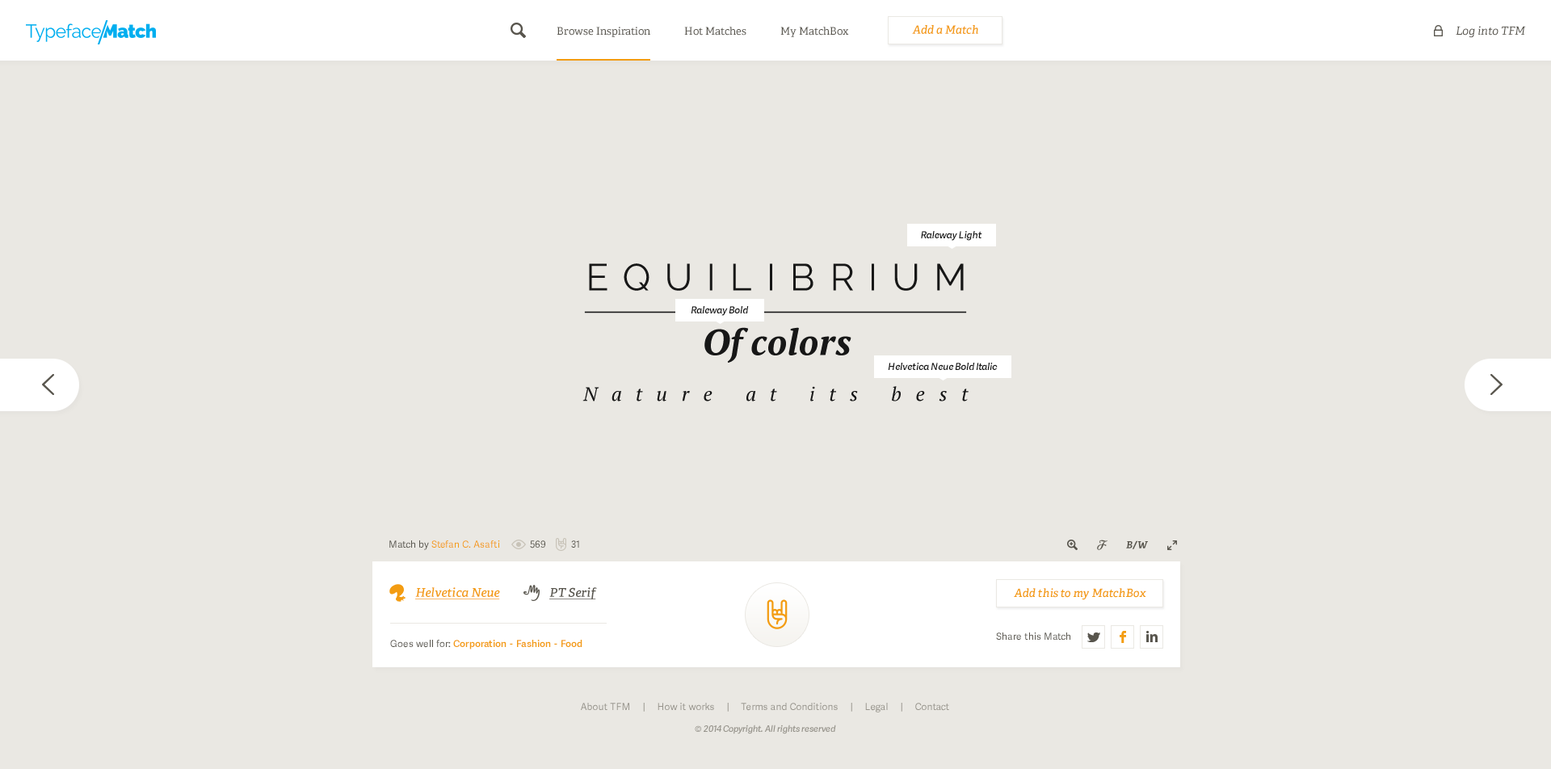
<style>
.page{position:relative;width:1551px;height:769px;background:#eae8e3}
.page>*{position:absolute;margin:0}
.t1{font:10.5px "Adelle-Regular";color:#58554d}
.t2{font:11.3px "Adelle-SemiBoldItalic";color:#f39c12}
.t3{font:11.3px "Adelle-Italic";color:#58554d}
.t4{font:9.7px "AdelleSans-SemiBoldItalic";color:#171717}
.t5{font:37.6px/29px "Raleway";letter-spacing:0.38em;color:#000000;text-transform:uppercase}
.t6{font:36.4px/64.7px "PTSerif-BoldItalic";color:#000000}
.t7{font:19.4px "PTSerif-Italic";letter-spacing:0.74em;color:#000000}
.t8{font:9.7px "AdelleSans";color:#f39c12}
.t9{font:9.7px "AdelleSans";color:#58554d}
.t10{font:9.7px "Adelle-BoldItalic";color:#58554d}
.t11{font:12.1px "Adelle-SemiBoldItalic";color:#f39c12;text-decoration:underline}
.t12{font:12.1px "Adelle-SemiBoldItalic";color:#58554d;text-decoration:underline}
.t13{font:9.7px "AdelleSans-SemiBold";color:#f39c12}
.t14{font:9.7px "AdelleSans";color:#97948c}
.t15{font:8.9px "AdelleSans-SemiBoldItalic";color:#97948c}
</style>
<div class="page">
<p class="t1" style="left:557px;top:27px;width:292px;height:10px">Browse Inspiration              Hot Matches              My MatchBox</p>
<p class="t2" style="left:912px;top:25px;width:66px;height:9px">Add a Match</p>
<p class="t3" style="left:1455px;top:26px;width:71px;height:12px">Log into TFM</p>
<p class="t4" style="left:921px;top:231px;width:61px;height:10px">Raleway Light</p>
<p class="t5" style="left:589px;top:263px;width:375px;height:100px;text-align:center">equilibrium<br><span class="t6">Of colors</span></p>
<p class="t4" style="left:691px;top:306px;width:58px;height:10px">Raleway Bold</p>
<p class="t4" style="left:888px;top:363px;width:110px;height:7px">Helvetica Neue Bold Italic</p>
<p class="t7" style="left:582px;top:386px;width:386px;height:15px">Nature at its best</p>
<p class="t8" style="left:389px;top:540px;width:111px;height:10px"><span class="t9">Match by </span>Stefan C. Asafti</p>
<p class="t9" style="left:530px;top:540px;width:15px;height:8px">569</p>
<p class="t9" style="left:571px;top:540px;width:8px;height:8px">31</p>
<p class="t10" style="left:1126px;top:540px;width:22px;height:9px">B/W</p>
<p class="t11" style="left:415px;top:587px;width:85px;height:12px">Helvetica Neue</p>
<p class="t12" style="left:549px;top:587px;width:48px;height:12px">PT Serif</p>
<p class="t2" style="left:1014px;top:588px;width:132px;height:12px">Add this to my MatchBox</p>
<p class="t13" style="left:390px;top:640px;width:192px;height:9px"><span class="t9">Goes well for: </span>Corporation  -  Fashion  -  Food</p>
<p class="t9" style="left:996px;top:632px;width:74px;height:9px">Share this Match</p>
<p class="t14" style="left:581px;top:703px;width:368px;height:9px">About TFM     |     How it works     |     Terms and Conditions     |     Legal     |     Contact</p>
<p class="t15" style="left:695px;top:725px;width:141px;height:9px">© 2014 Copyright. All rights reserved</p>
</div>
